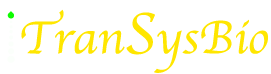
<style>
.page{position:relative;width:271px;height:74px;background:#ffffff}
.page>*{position:absolute;margin:0}
.t1{font:48px "Apple-Chancery";color:#ffe600}
.t2{font:60px "Apple-Chancery";color:#ffe600}
</style>
<div class="page">
<p class="t1" style="left:21px;top:9px;width:247px;height:64px">Tran<span class="t2">S</span>ysBio</p>
</div>
